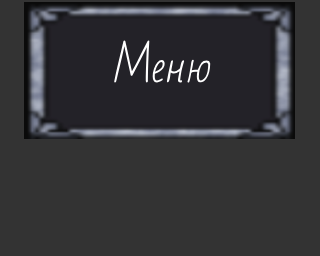
<style>
.page{position:relative;width:320px;height:256px;background:#333333}
.page>*{position:absolute;margin:0}
.t1{font:43px "BadScript-Regular";color:#ffffff}
</style>
<div class="page">
<p class="t1" style="left:114px;top:40px;width:97px;height:43px">Меню</p>
</div>
